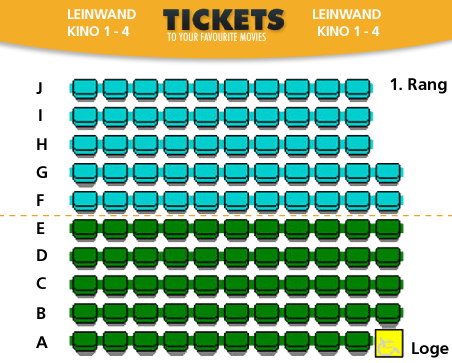
<style>
.page{position:relative;width:452px;height:363px;background:#ffffff}
.page>*{position:absolute;margin:0}
.t1{font:13.9px "Frutiger-Bold";letter-spacing:-0.025em;color:#ffffff}
.t2{font:16.7px "Frutiger-Bold";color:#000000}
</style>
<div class="page">
<p class="t1" style="left:68px;top:9px;width:68px;height:10px">LEINWAND</p>
<p class="t1" style="left:313px;top:9px;width:68px;height:10px">LEINWAND</p>
<p class="t1" style="left:68px;top:26px;width:62px;height:10px">KINO 1 - 4</p>
<p class="t1" style="left:318px;top:26px;width:62px;height:10px">KINO 1 - 4</p>
<p class="t2" style="left:390px;top:78px;width:57px;height:16px">1. Rang</p>
<p class="t2" style="left:36px;top:82px;width:6px;height:12px">J</p>
<p class="t2" style="left:39px;top:109px;width:3px;height:12px">I</p>
<p class="t2" style="left:37px;top:138px;width:10px;height:12px">H</p>
<p class="t2" style="left:36px;top:166px;width:11px;height:12px">G</p>
<p class="t2" style="left:37px;top:194px;width:7px;height:12px">F</p>
<p class="t2" style="left:37px;top:222px;width:8px;height:12px">E</p>
<p class="t2" style="left:37px;top:249px;width:10px;height:12px">D</p>
<p class="t2" style="left:36px;top:277px;width:10px;height:12px">C</p>
<p class="t2" style="left:37px;top:307px;width:9px;height:12px">B</p>
<p class="t2" style="left:36px;top:336px;width:12px;height:12px">A</p>
<p class="t2" style="left:412px;top:342px;width:37px;height:16px">Loge</p>
</div>
